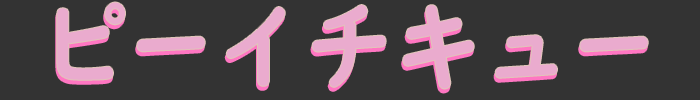
<style>
.page{position:relative;width:700px;height:100px;background:#333333}
.page>*{position:absolute;margin:0}
.t1{font:96.6px "UDDigiKyokashoN-B";color:#eaabce;scale:0.92 1}
</style>
<div class="page">
<p class="t1" style="left:57px;top:2px;width:591px;height:87px">ピーイチキュー</p>
</div>
